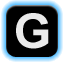
<style>
.page{position:relative;width:64px;height:63px;background:#000000}
.page>*{position:absolute;margin:0}
.t1{font:48px "Arial-BoldMT";color:#ebebeb}
</style>
<div class="page">
<p class="t1" style="left:16px;top:13px;width:33px;height:36px">G</p>
</div>
